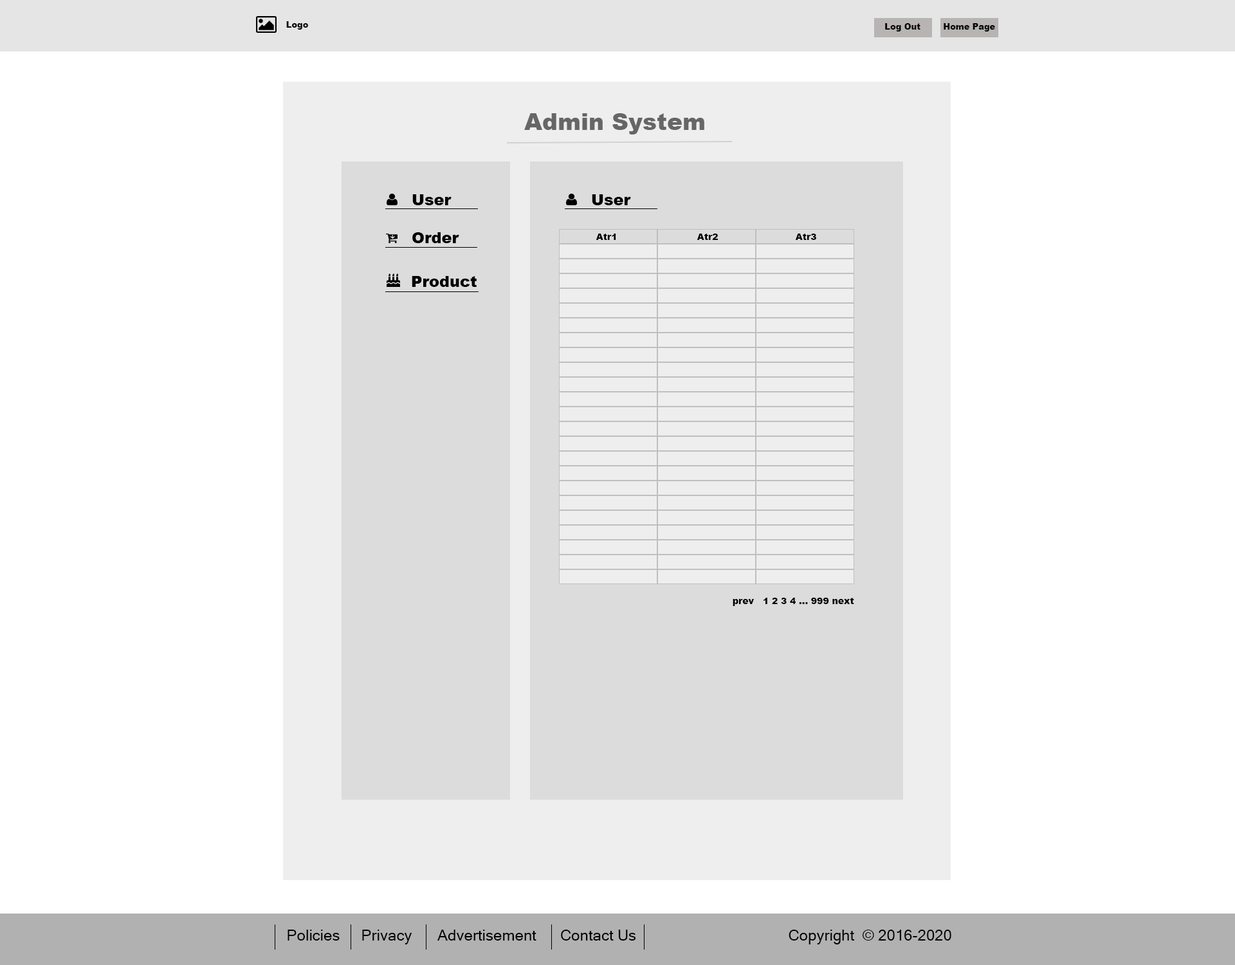
<style>
.page{position:relative;width:1235px;height:965px;background:#ffffff}
.page>*{position:absolute;margin:0}
.t1{font:8.4px "Arial-Black";color:#050505}
.t2{font:23.2px "Arial-Black";color:#666666}
.t3{font:15.4px "Arial-Black";color:#000000}
.t4{font:9px "Arial-Black";color:#000000}
.t5{font:15.4px "MicrosoftSansSerif";color:#000000}
</style>
<div class="page">
<p class="t1" style="left:286px;top:21px;width:22px;height:9px">Logo</p>
<p class="t1" style="left:885px;top:23px;width:36px;height:9px">Log Out</p>
<p class="t1" style="left:944px;top:23px;width:51px;height:9px">Home Page</p>
<p class="t2" style="left:524px;top:113px;width:181px;height:21px">Admin System</p>
<p class="t3" style="left:412px;top:194px;width:40px;height:11px">User</p>
<p class="t3" style="left:592px;top:194px;width:39px;height:11px">User</p>
<p class="t3" style="left:412px;top:232px;width:47px;height:11px">Order</p>
<p class="t4" style="left:596px;top:234px;width:20px;height:6px">Atr1</p>
<p class="t4" style="left:697px;top:234px;width:21px;height:6px">Atr2</p>
<p class="t4" style="left:795px;top:234px;width:22px;height:6px">Atr3</p>
<p class="t3" style="left:412px;top:276px;width:65px;height:11px">Product</p>
<p class="t4" style="left:733px;top:598px;width:122px;height:8px">prev   1 2 3 4 ... 999 next</p>
<p class="t5" style="left:288px;top:930px;width:52px;height:11px">Policies</p>
<p class="t5" style="left:362px;top:930px;width:50px;height:15px">Privacy</p>
<p class="t5" style="left:438px;top:930px;width:99px;height:11px">Advertisement</p>
<p class="t5" style="left:561px;top:930px;width:75px;height:11px">Contact Us</p>
<p class="t5" style="left:789px;top:930px;width:163px;height:15px">Copyright  © 2016-2020</p>
</div>
